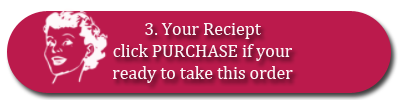
<style>
.page{position:relative;width:400px;height:100px;background:#bb1a4c}
.page>*{position:absolute;margin:0}
.t1{font:18px "CambriaMath";color:#fbf4f6}
.t2{font:18px "CambriaMath";color:#bb1a4c}
</style>
<div class="page">
<p class="t1" style="left:112px;top:23px;width:181px;height:60px;text-align:center"><span class="t2"><br><br></span>3. Your Reciept<br>click PURCHASE if your <br>ready to take this order</p>
</div>
